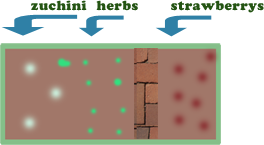
<style>
.page{position:relative;width:264px;height:145px;background:#ffffff}
.page>*{position:absolute;margin:0}
.t1{font:14px "CooperBlack";letter-spacing:0.03em;color:#245413}
</style>
<div class="page">
<p class="t1" style="left:31px;top:0px;width:56px;height:11px">zuchini</p>
<p class="t1" style="left:96px;top:0px;width:42px;height:11px">herbs</p>
<p class="t1" style="left:171px;top:0px;width:93px;height:13px">strawberrys</p>
</div>
